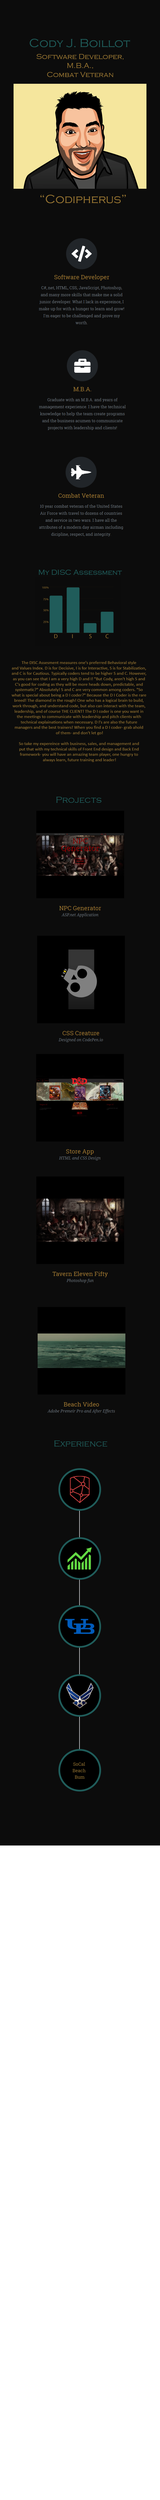
<style>
.page{position:relative;width:160px;height:2500px;background:#0c0c0c}
.page>*{position:absolute;margin:0}
.t1{font:12px "CopperplateGothic-Light";color:#1f5c5a}
.t2{font:7.5px "CopperplateGothic-Light";color:#977532}
.t3{font:12px "CopperplateGothic-Light";color:#977532}
.t4{font:7.5px "CopperplateGothic-Light";color:#1f5c5a}
.t5{font:4.5px "Calibri";color:#977532}
.t6{font:4.5px "Calibri";color:#1f5c5a}
.t7{font:9px "CopperplateGothic-Light";color:#1f5c5a}
</style>
<div class="page">
<p class="t1" style="left:30px;top:39px;width:100px;height:9px">Cody J. Boillot</p>
<p class="t2" style="left:36px;top:54px;width:87px;height:23px;text-align:center">Software Developer,<br>M.B.A.,<br>Combat Veteran</p>
<p class="t3" style="left:40px;top:195px;width:86px;height:9px">“Codipherus”</p>
<p class="t4" style="left:38px;top:570px;width:84px;height:5px">My DISC Assessment</p>
<p class="t5" style="left:12px;top:661px;width:134px;height:101px;text-align:center"><span class="t6"><br></span>The DISC Assesment measures one's preferred Behavioral style <br>and Values Index. D is for Decisive, I is for Interactive, S is for Stabilization, <br>and C is for Cautious. Typically coders tend to be higher S and C. However, <br>as you can see that I am a very high D and I! "But Cody, aren't high S and <br>C's good for coding as they will be more heads down, predictable, and <br>systematic?" Absolutely! S and C are very common among coders. "So <br>what is special about being a D I coder?" Because the D I Coder is the rare <br>breed! The diamond in the rough! One who has a logical brain to build, <br>work through, and understand code, but also can interact with the team, <br>leadership, and of course THE CLIENT! The D I coder is one you want in <br>the meetings to communicate with leadership and pitch clients with <br>technical explainations when necessary. D I's are also the future <br>managers and the best trainers! When you find a D I coder- grab ahold <br>of them- and don't let go!<br><br>So take my expereince with business, sales, and management and <br>put that with my technical skills of Front End design and Back End <br>framework- you will have an amazing team player, one hungry to <br>always learn, future training and leader!</p>
<p class="t7" style="left:56px;top:797px;width:45px;height:6px">Projects</p>
<p class="t7" style="left:54px;top:1440px;width:53px;height:7px">Experience</p>
</div>
